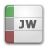
<style>
.page{position:relative;width:48px;height:48px;background:#ffffff}
.page>*{position:absolute;margin:0}
.t1{font:11px "Tahoma-Bold";letter-spacing:0.04em;color:#605e5e;font-weight:bold}
</style>
<div class="page">
<p class="t1" style="left:19px;top:20px;width:18px;height:9px">JW</p>
</div>
